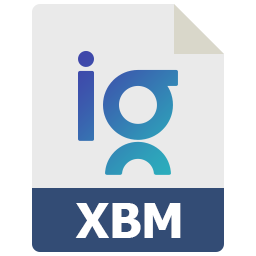
<style>
.page{position:relative;width:256px;height:256px;background:#eaeaea}
.page>*{position:absolute;margin:0}
.t1{font:48px "Tahoma-Bold";color:#ffffff}
</style>
<div class="page">
<p class="t1" style="left:75px;top:203px;width:106px;height:35px">XBM</p>
</div>
